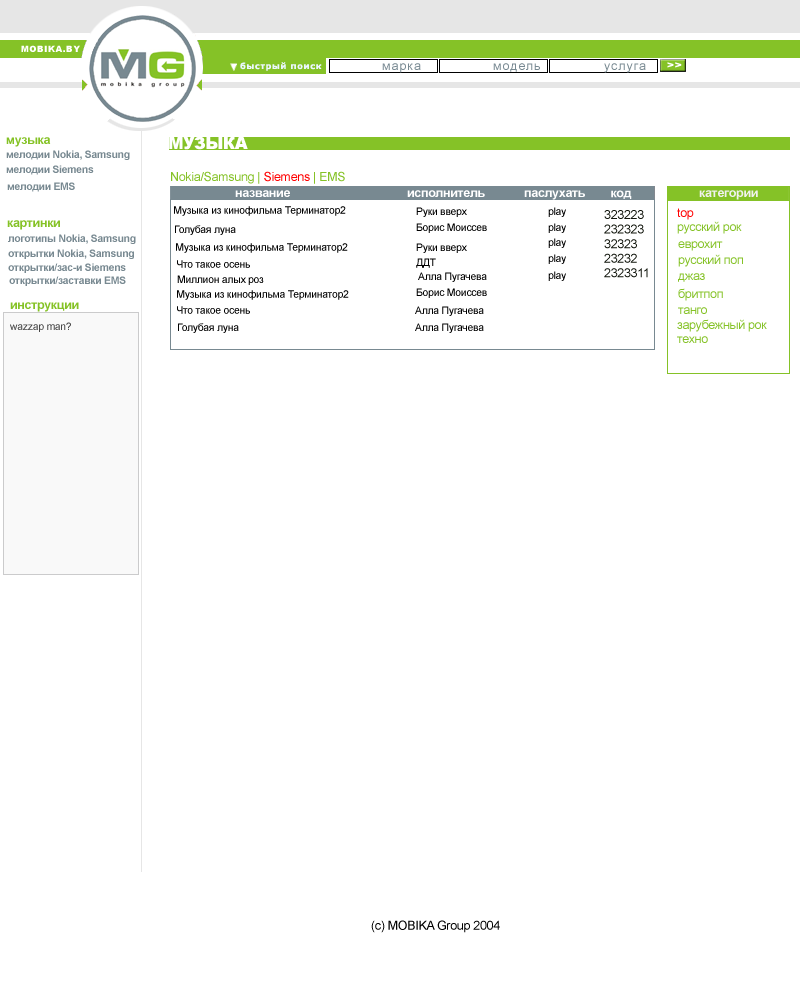
<style>
.page{position:relative;width:800px;height:1000px;background:#ffffff}
.page>*{position:absolute;margin:0}
.t1{font:8.3px "Arial-Black";letter-spacing:0.075em;color:#ffffff}
.t2{font:8.3px "Verdana-Bold";letter-spacing:0.075em;color:#ebf7fe}
.t3{font:12.5px "ArialMT";letter-spacing:0.075em;color:#788992}
.t4{font:8.5px "Arial-Black";letter-spacing:0.075em;color:#ffffff;scale:1.23 1}
.t5{font:12.5px "Arial-BoldMT";letter-spacing:-0.025em;color:#85c226}
.t6{font:16.7px "Arial-Black";letter-spacing:-0.025em;color:#ffffff}
.t7{font:10.4px "Arial-BoldMT";letter-spacing:-0.025em;color:#788991}
.t8{font:12.5px "ArialMT";letter-spacing:-0.025em;color:#85c227}
.t9{font:12.5px "ArialMT";letter-spacing:-0.025em;color:#ff0000}
.t10{font:12.5px "Arial-BoldMT";letter-spacing:-0.025em;color:#ffffff}
.t11{font:12.5px "Arial-BoldMT";letter-spacing:-0.025em;color:#f0f1ee}
.t12{font:10.4px "ArialMT";letter-spacing:-0.025em;color:#000000}
.t13{font:12.5px/14.6px "ArialMT";letter-spacing:-0.025em;color:#10140b}
.t14{font:10.4px "ArialMT";letter-spacing:-0.025em;color:#494949}
.t15{font:12.5px "ArialMT";letter-spacing:-0.025em;color:#000000}
</style>
<div class="page">
<p class="t1" style="left:21px;top:45px;width:59px;height:7px">MOBIKA.BY</p>
<p class="t2" style="left:240px;top:62px;width:82px;height:9px">быстрый поиск</p>
<p class="t3" style="left:493px;top:63px;width:47px;height:9px">модель</p>
<p class="t4" style="left:667px;top:62px;width:15px;height:6px">&gt;&gt;</p>
<p class="t5" style="left:6px;top:137px;width:45px;height:10px">музыка</p>
<p class="t6" style="left:169px;top:136px;width:79px;height:14px">МУЗЫКА</p>
<p class="t7" style="left:6px;top:150px;width:124px;height:10px">мелодии Nokia, Samsung</p>
<p class="t7" style="left:6px;top:165px;width:88px;height:10px">мелодии Siemens</p>
<p class="t8" style="left:171px;top:171px;width:174px;height:13px">Nokia/Samsung | <span class="t9">Siemens </span>| EMS</p>
<p class="t7" style="left:7px;top:182px;width:68px;height:10px">мелодии EMS</p>
<p class="t10" style="left:235px;top:190px;width:55px;height:7px">название</p>
<p class="t10" style="left:407px;top:190px;width:78px;height:7px">исполнитель</p>
<p class="t10" style="left:524px;top:190px;width:61px;height:10px">паслухать</p>
<p class="t10" style="left:611px;top:190px;width:21px;height:9px">код</p>
<p class="t11" style="left:699px;top:190px;width:59px;height:10px">категории</p>
<p class="t12" style="left:174px;top:206px;width:172px;height:10px">Музыка из кинофильма Терминатор2</p>
<p class="t12" style="left:416px;top:207px;width:51px;height:10px">Руки вверх</p>
<p class="t9" style="left:677px;top:208px;width:17px;height:12px">top</p>
<p class="t5" style="left:7px;top:220px;width:53px;height:10px">картинки</p>
<p class="t13" style="left:604px;top:210px;width:44px;height:68px">323223<br>232323<br>32323<br>23232<br>2323311</p>
<p class="t8" style="left:677px;top:221px;width:65px;height:13px">русский рок</p>
<p class="t12" style="left:175px;top:225px;width:61px;height:10px">Голубая луна</p>
<p class="t12" style="left:416px;top:223px;width:71px;height:10px">Борис Моиссев</p>
<p class="t7" style="left:8px;top:234px;width:128px;height:10px">логотипы Nokia, Samsung</p>
<p class="t12" style="left:176px;top:243px;width:172px;height:10px">Музыка из кинофильма Терминатор2</p>
<p class="t12" style="left:416px;top:243px;width:51px;height:10px">Руки вверх</p>
<p class="t8" style="left:678px;top:241px;width:45px;height:10px">еврохит</p>
<p class="t7" style="left:8px;top:249px;width:126px;height:10px">открытки Nokia, Samsung</p>
<p class="t8" style="left:678px;top:254px;width:65px;height:13px">русский поп</p>
<p class="t7" style="left:8px;top:263px;width:118px;height:10px">открытки/зас-и Siemens</p>
<p class="t12" style="left:177px;top:260px;width:73px;height:8px">Что такое осень</p>
<p class="t12" style="left:416px;top:258px;width:20px;height:10px">ДДТ</p>
<p class="t7" style="left:9px;top:276px;width:117px;height:10px">открытки/заставки EMS</p>
<p class="t12" style="left:177px;top:275px;width:87px;height:10px">Миллион алых роз</p>
<p class="t12" style="left:418px;top:272px;width:69px;height:10px">Алла Пугачева</p>
<p class="t8" style="left:678px;top:273px;width:27px;height:9px">джаз</p>
<p class="t12" style="left:177px;top:290px;width:172px;height:10px">Музыка из кинофильма Терминатор2</p>
<p class="t12" style="left:416px;top:288px;width:71px;height:10px">Борис Моиссев</p>
<p class="t8" style="left:678px;top:288px;width:45px;height:13px">бритпоп</p>
<p class="t5" style="left:10px;top:302px;width:69px;height:10px">инструкции</p>
<p class="t12" style="left:177px;top:306px;width:73px;height:8px">Что такое осень</p>
<p class="t12" style="left:415px;top:306px;width:69px;height:10px">Алла Пугачева</p>
<p class="t8" style="left:678px;top:307px;width:29px;height:7px">танго</p>
<p class="t14" style="left:10px;top:322px;width:61px;height:10px">wazzap man?</p>
<p class="t12" style="left:178px;top:323px;width:61px;height:10px">Голубая луна</p>
<p class="t12" style="left:415px;top:323px;width:69px;height:10px">Алла Пугачева</p>
<p class="t8" style="left:677px;top:319px;width:90px;height:13px">зарубежный рок</p>
<p class="t8" style="left:677px;top:336px;width:31px;height:7px">техно</p>
<p class="t15" style="left:371px;top:920px;width:129px;height:13px">(с) MOBIKA Group 2004</p>
</div>
